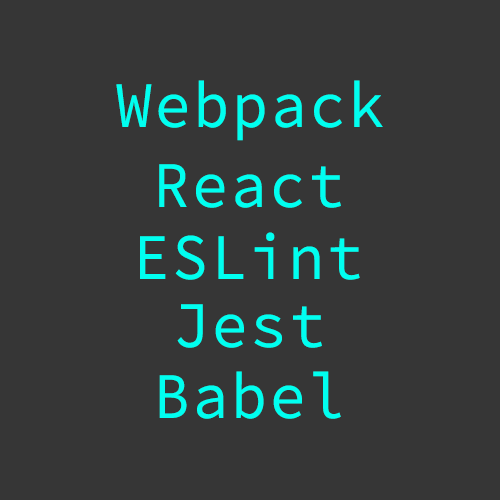
<style>
.page{position:relative;width:500px;height:500px;background:#363636}
.page>*{position:absolute;margin:0}
.t1{font:64.8px "SourceCodePro-Regular";letter-spacing:0.045em;color:#00fff0;scale:0.93 1}
</style>
<div class="page">
<p class="t1" style="left:116px;top:80px;width:267px;height:61px">Webpack</p>
<p class="t1" style="left:159px;top:164px;width:182px;height:44px">React</p>
<p class="t1" style="left:140px;top:232px;width:220px;height:48px">ESLint</p>
<p class="t1" style="left:177px;top:304px;width:145px;height:44px">Jest</p>
<p class="t1" style="left:159px;top:371px;width:182px;height:48px">Babel</p>
</div>
